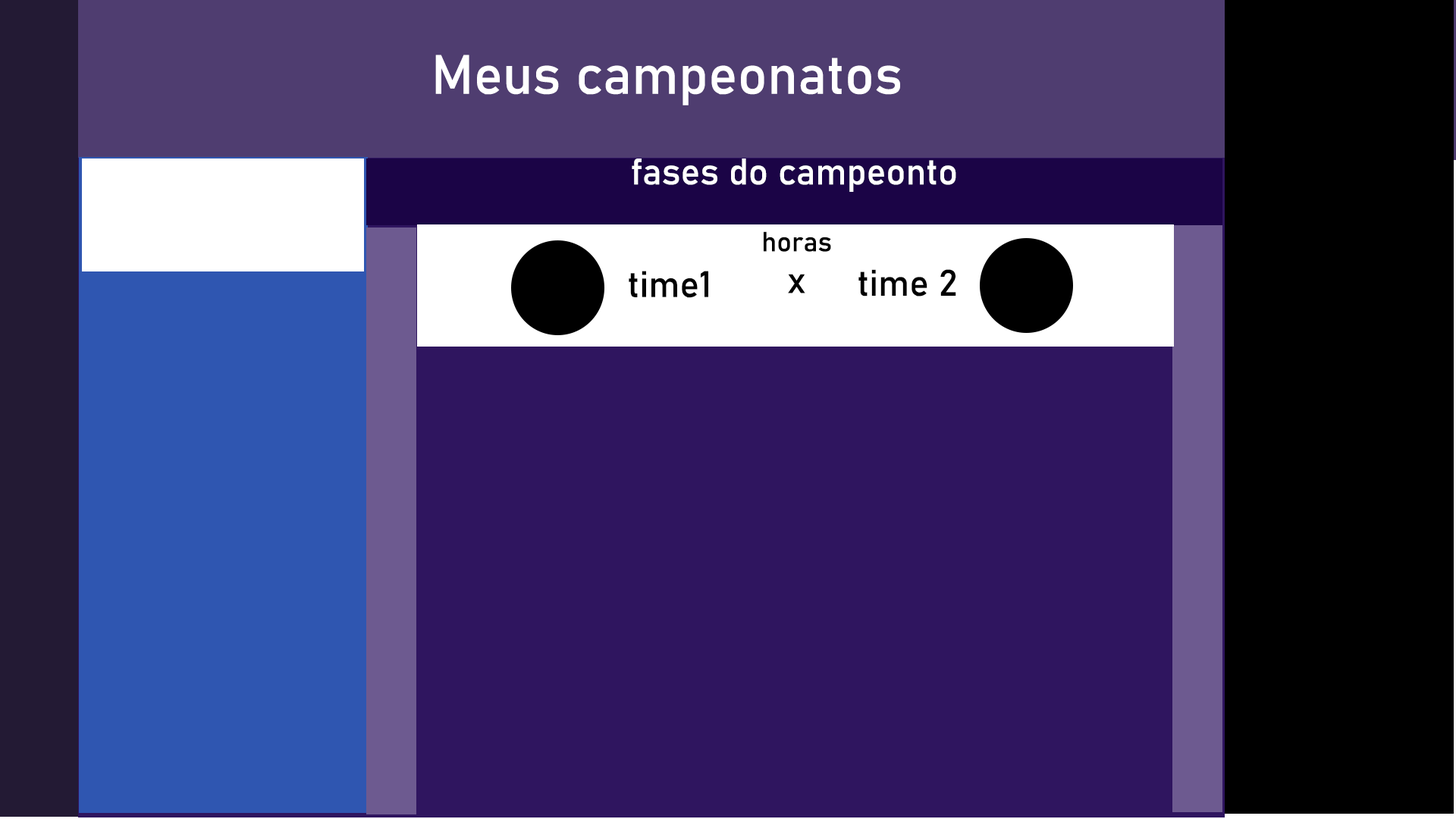
<style>
.page{position:relative;width:1456px;height:819px;background:#2f155f}
.page>*{position:absolute;margin:0}
.t1{font:54.6px "Bahnschrift";color:#ffffff}
.t2{font:36.4px "Bahnschrift";color:#ffffff}
.t3{font:27.3px "Bahnschrift";color:#000000}
.t4{font:36.4px "Bahnschrift";color:#000000}
</style>
<div class="page">
<p class="t1" style="left:435px;top:55px;width:465px;height:50px">Meus campeonatos</p>
<p class="t2" style="left:632px;top:158px;width:324px;height:34px">fases do campeonto</p>
<p class="t3" style="left:764px;top:231px;width:67px;height:21px">horas</p>
<p class="t4" style="left:858px;top:269px;width:98px;height:28px">time 2</p>
<p class="t4" style="left:629px;top:271px;width:79px;height:27px">time1</p>
<p class="t4" style="left:788px;top:274px;width:17px;height:19px">x</p>
</div>
